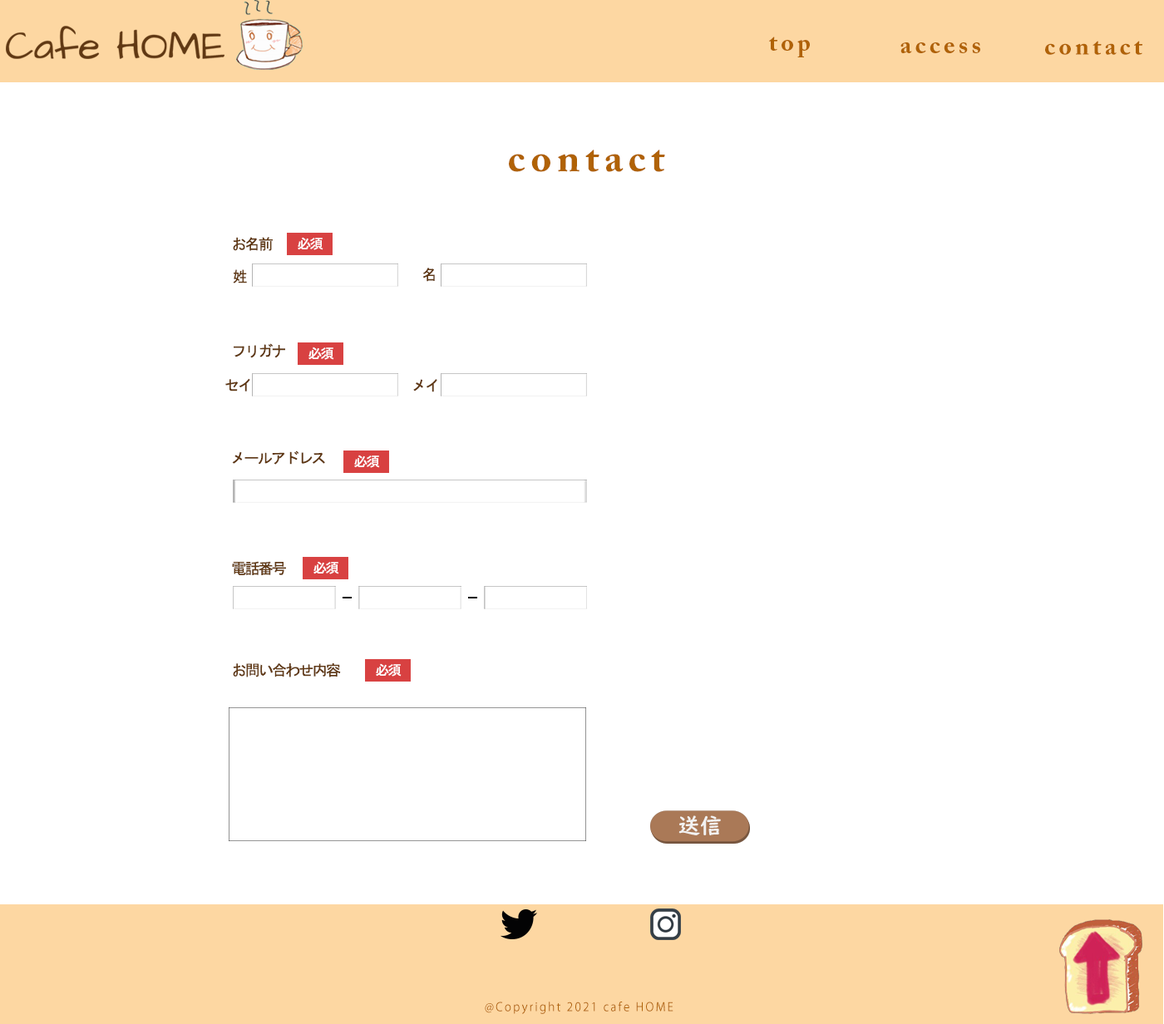
<style>
.page{position:relative;width:1164px;height:1024px;background:#ffffff}
.page>*{position:absolute;margin:0}
.t1{font:24.9px "ACaslonPro-Bold";letter-spacing:0.14em;color:#b06206}
.t2{font:39.9px "ACaslonPro-Bold";letter-spacing:0.14em;color:#b06206}
.t3{font:15px "MS-Gothic";letter-spacing:-0.1em;color:#603813}
.t4{font:13.5px "MS-Gothic";letter-spacing:-0.1em;color:#ffffff}
.t5{font:11.6px "KozGoPr6N-Regular";letter-spacing:0.14em;color:#b06206}
</style>
<div class="page">
<p class="t1" style="left:769px;top:37px;width:41px;height:20px">top</p>
<p class="t1" style="left:1045px;top:41px;width:97px;height:14px">contact</p>
<p class="t1" style="left:900px;top:42px;width:80px;height:11px">access</p>
<p class="t2" style="left:509px;top:150px;width:156px;height:22px">contact</p>
<p class="t3" style="left:233px;top:237px;width:40px;height:14px">お名前</p>
<p class="t4" style="left:298px;top:237px;width:25px;height:13px">必須</p>
<p class="t3" style="left:233px;top:269px;width:14px;height:15px">姓</p>
<p class="t3" style="left:423px;top:268px;width:12px;height:14px">名</p>
<p class="t3" style="left:234px;top:343px;width:51px;height:15px">フリガナ</p>
<p class="t4" style="left:308px;top:347px;width:26px;height:13px">必須</p>
<p class="t3" style="left:225px;top:378px;width:25px;height:14px">セイ</p>
<p class="t3" style="left:413px;top:379px;width:24px;height:13px">メイ</p>
<p class="t3" style="left:232px;top:451px;width:93px;height:14px">メールアドレス</p>
<p class="t4" style="left:354px;top:455px;width:26px;height:13px">必須</p>
<p class="t3" style="left:232px;top:561px;width:54px;height:14px">電話番号</p>
<p class="t4" style="left:313px;top:561px;width:26px;height:14px">必須</p>
<p class="t3" style="left:233px;top:664px;width:108px;height:14px">お問い合わせ内容</p>
<p class="t4" style="left:376px;top:664px;width:26px;height:13px">必須</p>
<p class="t5" style="left:485px;top:1002px;width:188px;height:12px">@Copyright 2021 cafe HOME</p>
</div>
